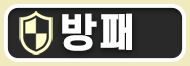
<style>
.page{position:relative;width:190px;height:66px;background:#292929}
.page>*{position:absolute;margin:0}
.t1{font:39px "S-CoreDream-6Bold";color:#fefefe;font-weight:bold}
</style>
<div class="page">
<p class="t1" style="left:62px;top:13px;width:70px;height:38px">방패</p>
</div>
